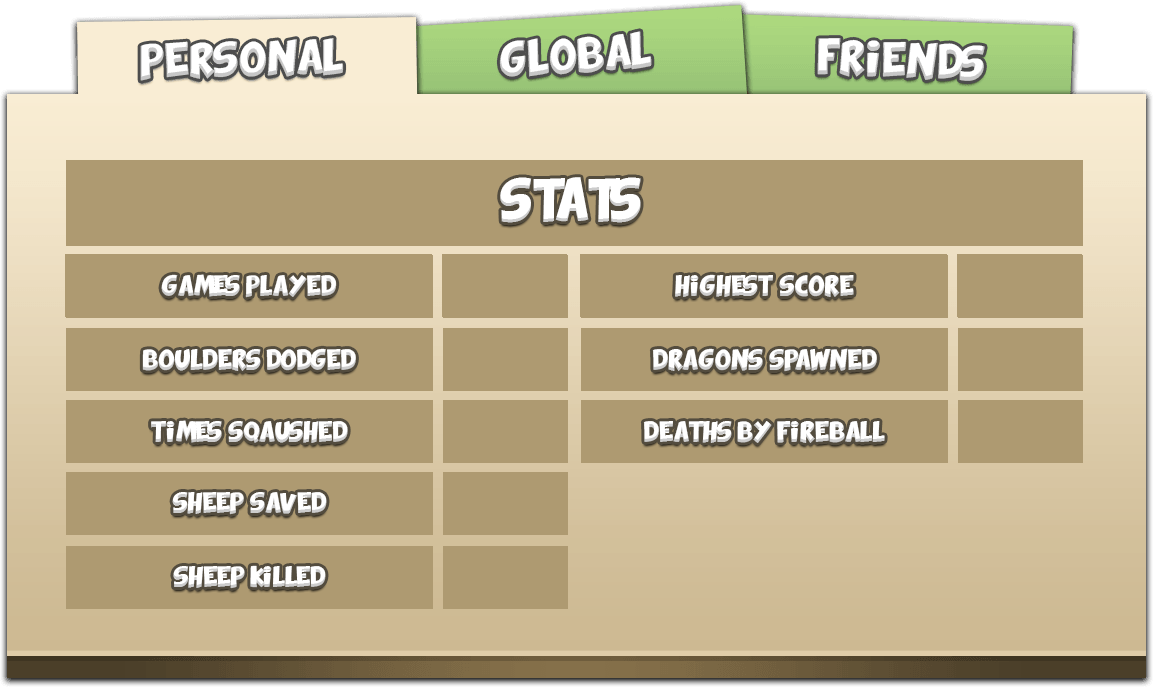
<style>
.page{position:relative;width:1153px;height:687px;background:#ae9a71}
.page>*{position:absolute;margin:0}
.t1{font:30px "ComixLoud";color:#ffffff}
.t2{font:14px "ComixLoud";color:#ffffff}
</style>
<div class="page">
<p class="t1" style="left:500px;top:177px;width:141px;height:46px">STATS</p>
<p class="t2" style="left:161px;top:274px;width:176px;height:24px">GAMES PLAYED</p>
<p class="t2" style="left:675px;top:274px;width:179px;height:23px">HIGHEST SCORE</p>
<p class="t2" style="left:142px;top:348px;width:214px;height:23px">BOULDERS DODGED</p>
<p class="t2" style="left:652px;top:348px;width:225px;height:24px">DRAGONS SPAWNED</p>
<p class="t2" style="left:151px;top:420px;width:197px;height:23px">TIMES SQAUSHED</p>
<p class="t2" style="left:643px;top:421px;width:242px;height:22px">DEATHS BY FIREBALL</p>
<p class="t2" style="left:172px;top:492px;width:155px;height:23px">SHEEP SAVED</p>
<p class="t2" style="left:173px;top:565px;width:153px;height:24px">SHEEP KILLED</p>
</div>
